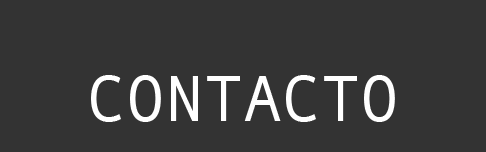
<style>
.page{position:relative;width:486px;height:152px;background:#333333}
.page>*{position:absolute;margin:0}
.t1{font:65px "AndaleMono";color:#ffffff}
</style>
<div class="page">
<p class="t1" style="left:91px;top:75px;width:304px;height:47px">CONTACTO</p>
</div>
